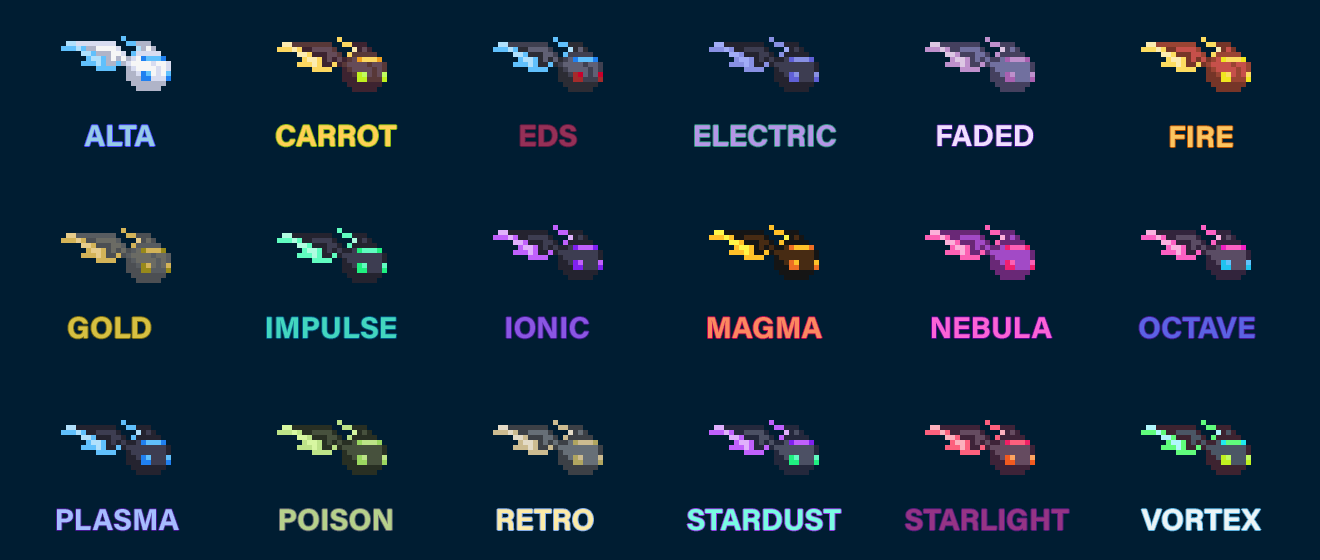
<style>
.page{position:relative;width:1320px;height:560px;background:#001d32}
.page>*{position:absolute;margin:0}
.t1{font:30px "AcuminConcept-Bold";color:#96cbe7}
.t2{font:30px "AcuminConcept-Bold";color:#ffd155}
.t3{font:30px "AcuminConcept-Bold";color:#953057}
.t4{font:30px "AcuminConcept-Bold";color:#b496e7}
.t5{font:30px "AcuminConcept-Bold";color:#f1deff}
.t6{font:30px "AcuminConcept-Bold";color:#fcc560}
.t7{font:30px "AcuminConcept-Bold";color:#d6c042}
.t8{font:30px "AcuminConcept-Bold";color:#42d6bf}
.t9{font:30px "AcuminConcept-Bold";color:#8a56e3}
.t10{font:30px "AcuminConcept-Bold";color:#fc8760}
.t11{font:30px "AcuminConcept-Bold";color:#fc62d7}
.t12{font:30px "AcuminConcept-Bold";color:#5b62e4}
.t13{font:30px "AcuminConcept-Bold";color:#a6bdff}
.t14{font:30px "AcuminConcept-Bold";color:#b6d18b}
.t15{font:30px "AcuminConcept-Bold";color:#fceba8}
.t16{font:30px "AcuminConcept-Bold";color:#78fce2}
.t17{font:30px "AcuminConcept-Bold";color:#953485}
.t18{font:30px "AcuminConcept-Bold";color:#ecf4f5}
</style>
<div class="page">
<p class="t1" style="left:84px;top:125px;width:71px;height:21px">ALTA</p>
<p class="t2" style="left:276px;top:125px;width:121px;height:22px">CARROT</p>
<p class="t3" style="left:520px;top:125px;width:57px;height:22px">EDS</p>
<p class="t4" style="left:695px;top:125px;width:141px;height:22px">ELECTRIC</p>
<p class="t5" style="left:937px;top:125px;width:97px;height:21px">FADED</p>
<p class="t6" style="left:1170px;top:126px;width:63px;height:21px">FIRE</p>
<p class="t7" style="left:68px;top:317px;width:83px;height:22px">GOLD</p>
<p class="t8" style="left:267px;top:317px;width:130px;height:22px">IMPULSE</p>
<p class="t9" style="left:506px;top:317px;width:83px;height:22px">IONIC</p>
<p class="t10" style="left:708px;top:317px;width:114px;height:22px">MAGMA</p>
<p class="t11" style="left:932px;top:317px;width:120px;height:22px">NEBULA</p>
<p class="t12" style="left:1139px;top:317px;width:116px;height:22px">OCTAVE</p>
<p class="t13" style="left:57px;top:509px;width:122px;height:22px">PLASMA</p>
<p class="t14" style="left:280px;top:509px;width:112px;height:22px">POISON</p>
<p class="t15" style="left:497px;top:509px;width:96px;height:22px">RETRO</p>
<p class="t16" style="left:687px;top:509px;width:154px;height:22px">STARDUST</p>
<p class="t17" style="left:905px;top:509px;width:164px;height:22px">STARLIGHT</p>
<p class="t18" style="left:1141px;top:509px;width:120px;height:22px">VORTEX</p>
</div>
